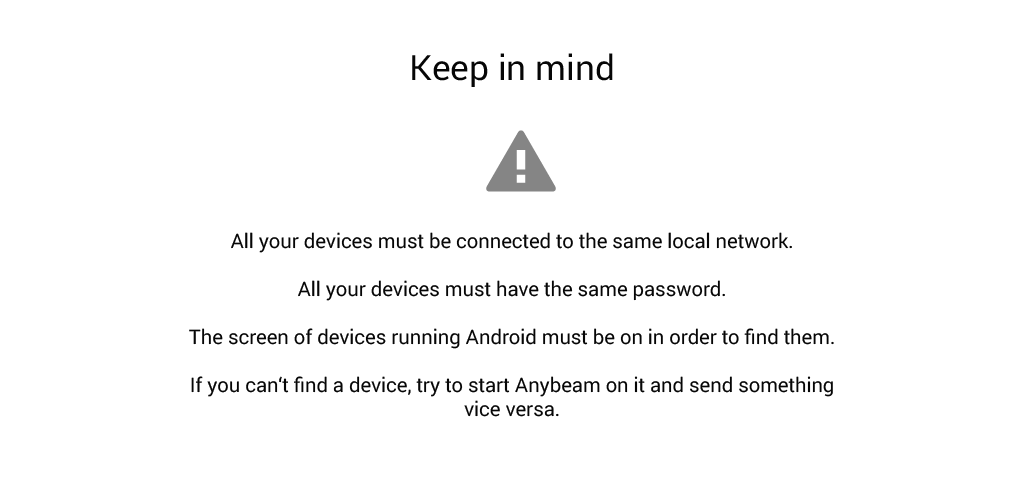
<style>
.page{position:relative;width:1024px;height:500px;background:#ffffff}
.page>*{position:absolute;margin:0}
.t1{font:34.8px "Roboto-Regular";color:#060606}
.t2{font:20px "Roboto-Regular";color:#060606}
</style>
<div class="page">
<p class="t1" style="left:412px;top:53px;width:201px;height:34px">Keep in mind</p>
<p class="t2" style="left:189px;top:232px;width:645px;height:185px;text-align:center">All your devices must be connected to the same local network.<br><br>All your devices must have the same password.<br><br>The screen of devices running Android must be on in order to find them.<br><br>If you can‘t find a device, try to start Anybeam on it and send something <br>vice versa.</p>
</div>
